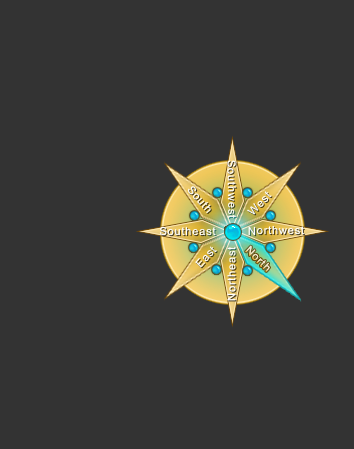
<style>
.page{position:relative;width:354px;height:449px;background:#333333}
.page>*{position:absolute;margin:0}
.t1{font:11px "ArialMT";letter-spacing:0.075em;color:#ffffff}
</style>
<div class="page">
<p class="t1" style="left:227px;top:160px;width:10px;height:59px;rotate:89deg">Southwest</p>
<p class="t1" style="left:187px;top:186px;width:24px;height:27px;rotate:49deg">South</p>
<p class="t1" style="left:247px;top:191px;width:25px;height:24px;rotate:-46deg">West</p>
<p class="t1" style="left:159px;top:226px;width:57px;height:10px;rotate:-1deg">Southeast</p>
<p class="t1" style="left:248px;top:225px;width:57px;height:11px">Northwest</p>
<p class="t1" style="left:195px;top:246px;width:22px;height:22px;rotate:-48deg">East</p>
<p class="t1" style="left:227px;top:246px;width:9px;height:55px;rotate:-90deg">Northeast</p>
</div>
